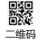
<style>
.page{position:relative;width:40px;height:40px;background:#ffffff}
.page>*{position:absolute;margin:0}
.t1{font:10px "MicrosoftYaHei";color:#474747;font-weight:bold}
</style>
<div class="page">
<p class="t1" style="left:5px;top:29px;width:31px;height:11px">二维码</p>
</div>
